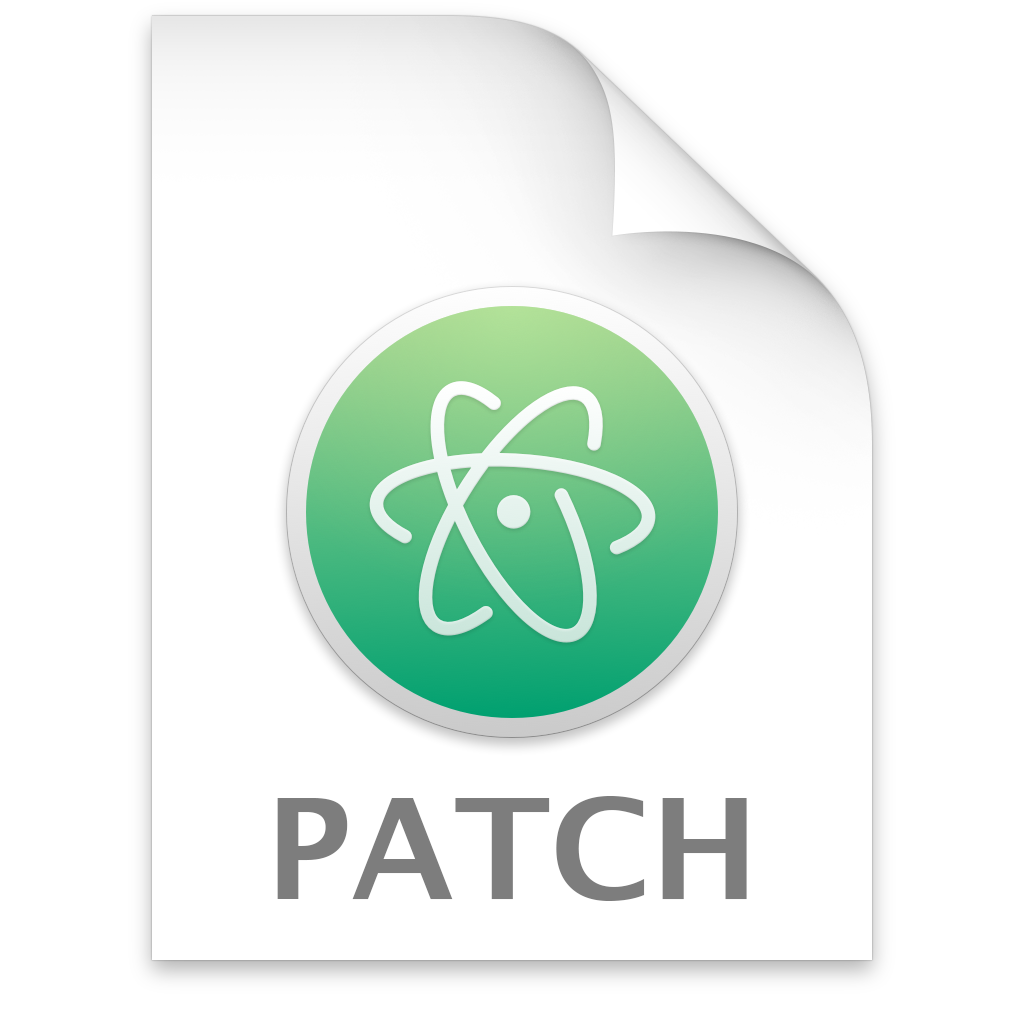
<style>
.page{position:relative;width:1024px;height:1024px;background:#ffffff}
.page>*{position:absolute;margin:0}
.t1{font:140px "LucidaGrande-Bold";color:#7d7d7d}
</style>
<div class="page">
<p class="t1" style="left:277px;top:796px;width:470px;height:105px">PATCH</p>
</div>
